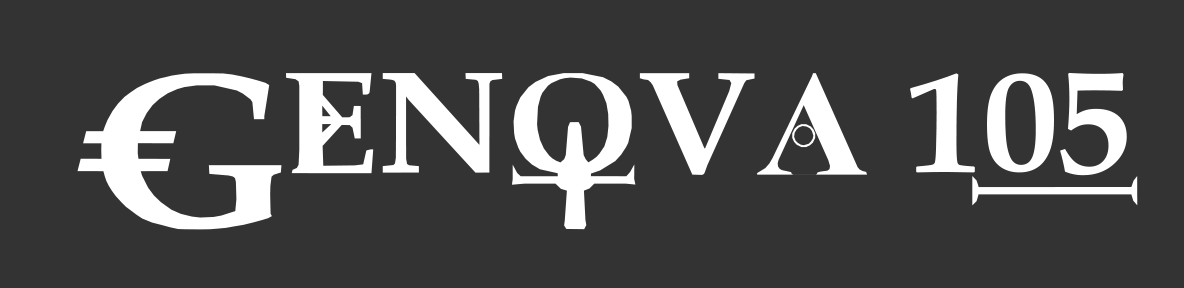
<style>
.page{position:relative;width:1184px;height:288px;background:#333333}
.page>*{position:absolute;margin:0}
.t1{font:150px "Dreaming-of-Lilian";color:#ffffff}
</style>
<div class="page">
<p class="t1" style="left:77px;top:72px;width:1061px;height:158px">Genova 1.05</p>
</div>
